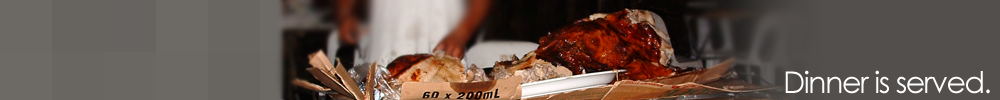
<style>
.page{position:relative;width:1000px;height:100px}
.page>*{position:absolute;margin:0}
.t1{font:30px "CenturyGothic";letter-spacing:-0.05em;color:#ffffff}
</style>
<div class="page">
<p class="t1" style="left:785px;top:70px;width:205px;height:24px">Dinner is served.</p>
</div>
